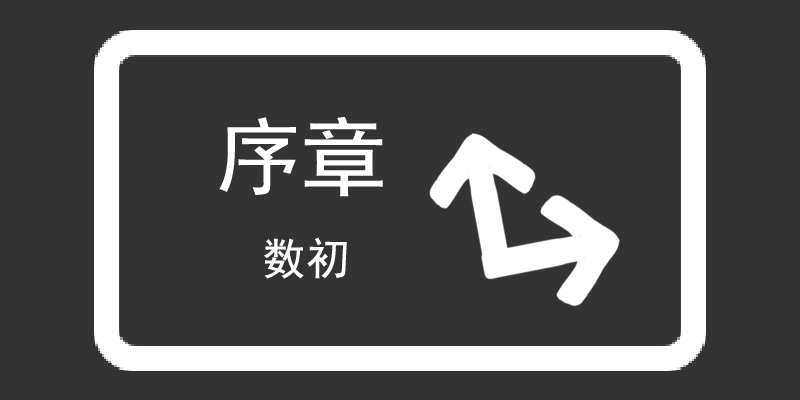
<style>
.page{position:relative;width:800px;height:400px;background:#333333}
.page>*{position:absolute;margin:0}
.t1{font:84.7px "SimHei";color:#ffffff}
.t2{font:44.1px "SimHei";color:#ffffff}
</style>
<div class="page">
<p class="t1" style="left:219px;top:117px;width:164px;height:80px">序章</p>
<p class="t2" style="left:263px;top:237px;width:84px;height:42px">数初</p>
</div>
